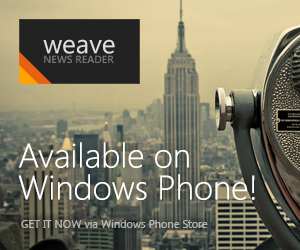
<style>
.page{position:relative;width:300px;height:250px}
.page>*{position:absolute;margin:0}
.t1{font:10.4px/9.7px "SegoeUI-Semibold";color:#767676}
.t2{font:26.3px/9.7px "SegoeUI";color:#dfdfdf}
.t3{font:34px/32px "SegoeUI-Light";color:#ffffff}
.t4{font:11px "SegoeUI";color:#b4b6b3}
</style>
<div class="page">
<p class="t1" style="left:43px;top:39px;width:72px;height:24px"><span class="t2">weave<br></span>NEWS READER</p>
<p class="t3" style="left:18px;top:142px;width:237px;height:58px">Available on<br>Windows Phone!</p>
<p class="t4" style="left:21px;top:220px;width:187px;height:8px">GET IT NOW via Windows Phone Store</p>
</div>
